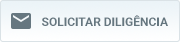
<style>
.page{position:relative;width:180px;height:42px}
.page>*{position:absolute;margin:0}
.t1{font:12px "Roboto-Bold";color:#667780;text-transform:uppercase}
</style>
<div class="page">
<p class="t1" style="left:42px;top:15px;width:126px;height:11px">solicitar diligência</p>
</div>
